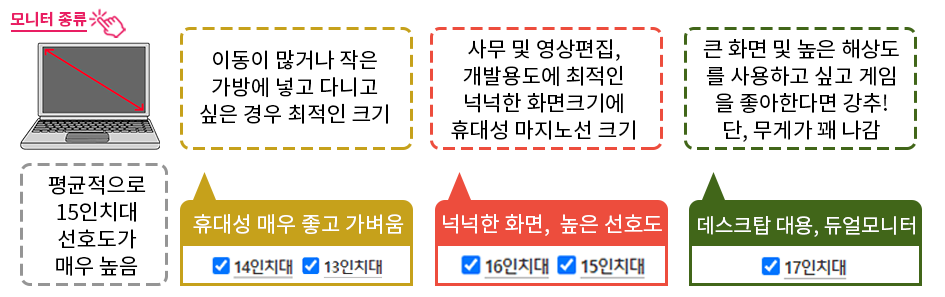
<style>
.page{position:relative;width:945px;height:297px;background:#ffffff}
.page>*{position:absolute;margin:0}
.t1{font:16px "NotoSansKR-Bold";color:#e91e63}
.t2{font:21.4px/26.9px "NotoSansKR-Regular";color:#000000}
.t3{font:21.4px "NotoSansKR-Regular";color:#ffffff}
.t4{font:20.4px "NotoSansKR-Regular";color:#ffffff}
</style>
<div class="page">
<p class="t1" style="left:10px;top:11px;width:77px;height:16px">모니터 종류</p>
<p class="t2" style="left:451px;top:39px;width:184px;height:101px;text-align:center">사무 및 영상편집,<br>개발용도에 최적인<br>넉넉한 화면크기에<br>휴대성 마지노선 크기</p>
<p class="t2" style="left:703px;top:39px;width:196px;height:103px;text-align:center">큰 화면 및 높은 해상도<br>를 사용하고 싶고 게임<br>을 좋아한다면 강추!<br>단, 무게가 꽤 나감</p>
<p class="t2" style="left:200px;top:50px;width:188px;height:74px;text-align:center">이동이 많거나 작은<br>가방에 넣고 다니고<br>싶은 경우 최적인 크기</p>
<p class="t2" style="left:48px;top:175px;width:98px;height:101px;text-align:center">평균적으로<br>15인치대<br>선호도가<br>매우 높음</p>
<p class="t3" style="left:193px;top:214px;width:211px;height:20px">휴대성 매우 좋고 가벼움</p>
<p class="t3" style="left:443px;top:214px;width:219px;height:22px">넉넉한 화면,  높은 선호도</p>
<p class="t4" style="left:698px;top:216px;width:217px;height:21px">데스크탑 대용, 듀얼모니터</p>
</div>
